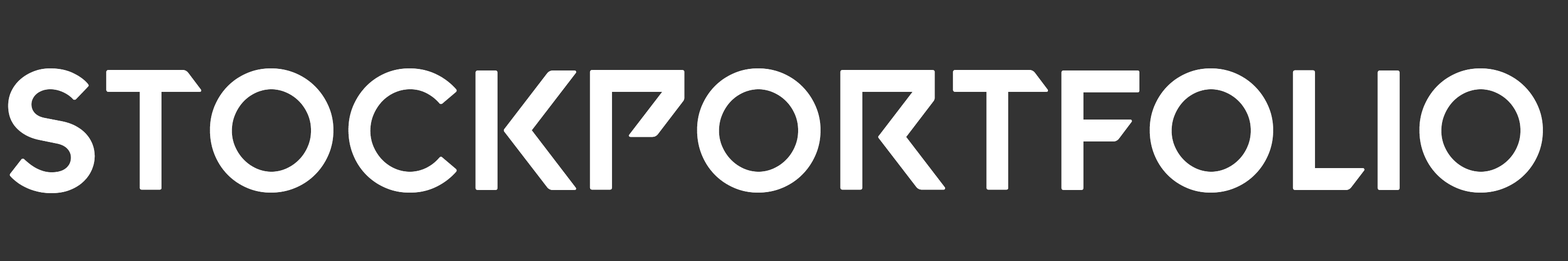
<style>
.page{position:relative;width:1568px;height:261px;background:#333333}
.page>*{position:absolute;margin:0}
.t1{font:171.1px "VALORANT-Regular";color:#ffffff}
</style>
<div class="page">
<p class="t1" style="left:8px;top:68px;width:1535px;height:125px">StockPortfolio</p>
</div>
